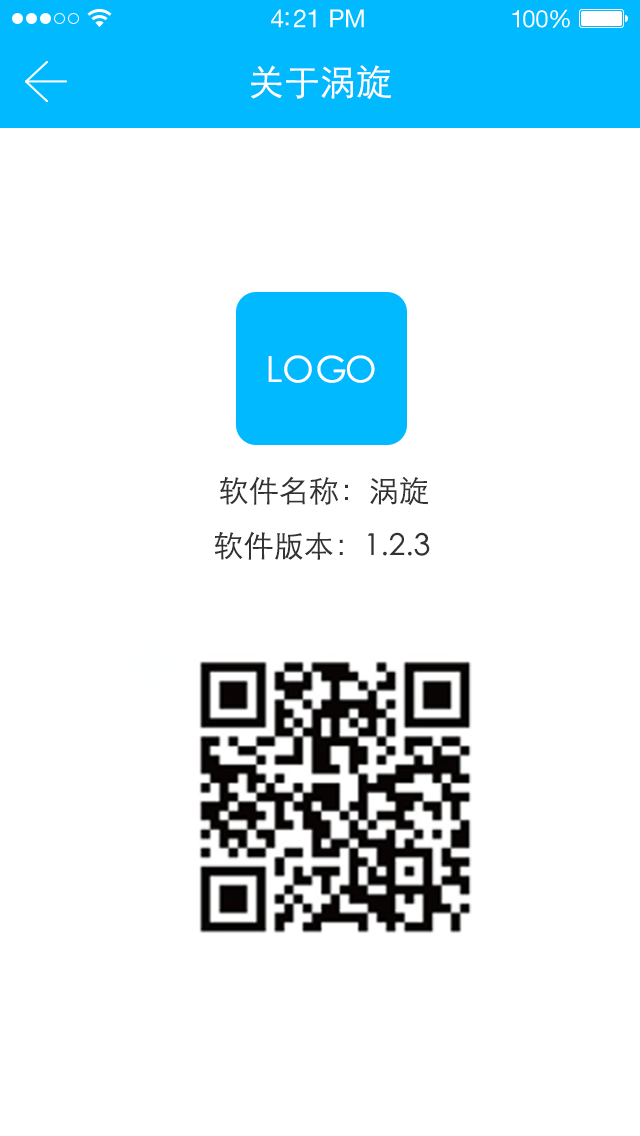
<style>
.page{position:relative;width:640px;height:1136px;background:#ffffff}
.page>*{position:absolute;margin:0}
.t1{font:25px "HelveticaNeueLTStd-Roman";letter-spacing:-0.02em;color:#ffffff}
.t2{font:24px "HelveticaNeueLTStd-Roman";letter-spacing:-0.02em;color:#ffffff}
.t3{font:36px "STXihei";color:#ffffff;text-transform:uppercase}
.t4{font:30px "STXihei";color:#333333;text-transform:uppercase}
</style>
<div class="page">
<p class="t1" style="left:271px;top:9px;width:93px;height:19px">4:21 PM</p>
<p class="t2" style="left:512px;top:9px;width:58px;height:19px">100%</p>
<p class="t3" style="left:251px;top:65px;width:140px;height:34px">关于涡旋</p>
<p class="t3" style="left:268px;top:355px;width:107px;height:28px">logo</p>
<p class="t4" style="left:220px;top:476px;width:209px;height:29px">软件名称：涡旋</p>
<p class="t4" style="left:214px;top:531px;width:216px;height:29px">软件版本：1.2.3</p>
</div>
